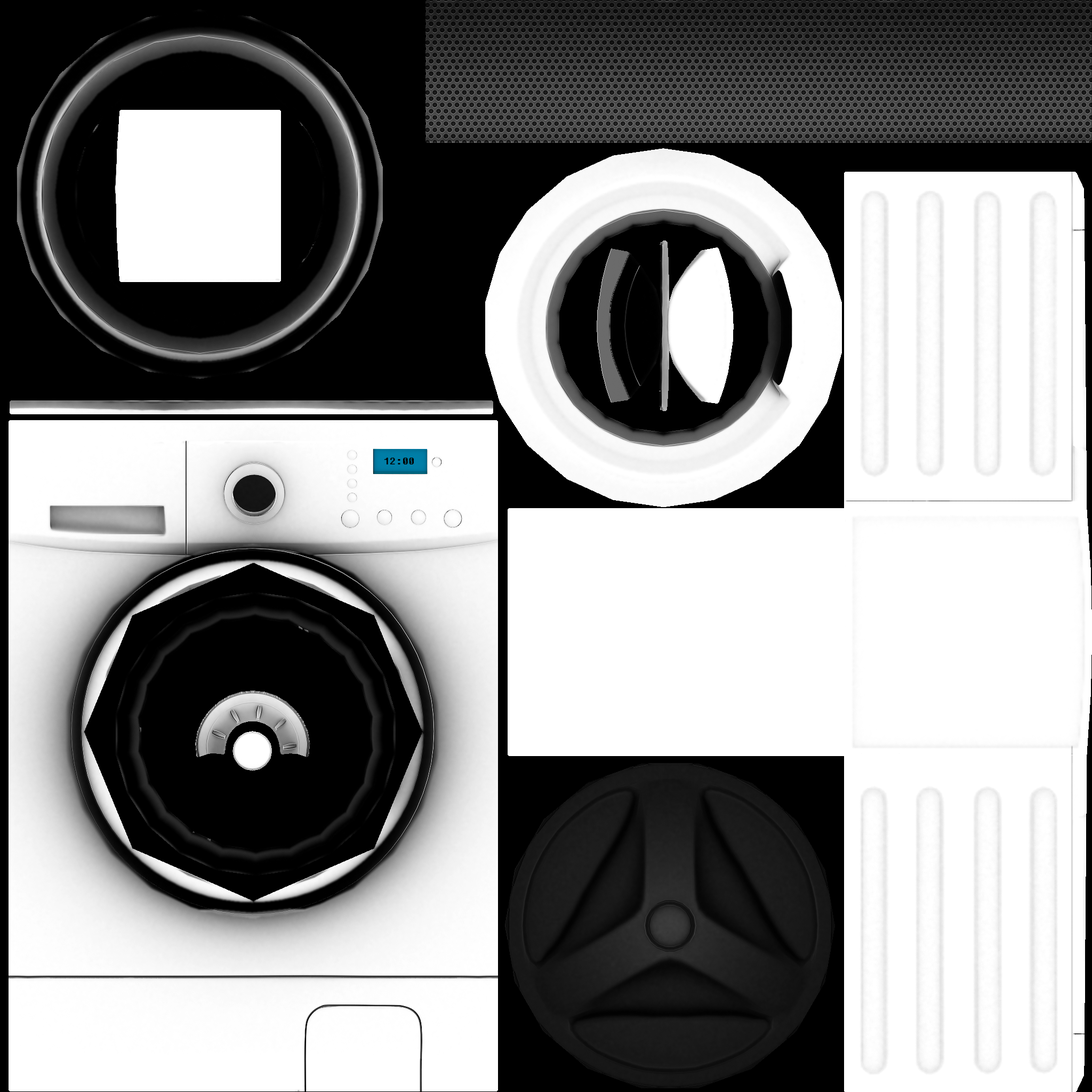
<style>
.page{position:relative;width:1092px;height:1092px;background:#ffffff}
.page>*{position:absolute;margin:0}
.t1{font:9.7px "Fixedsys";color:#000000}
</style>
<div class="page">
<p class="t1" style="left:384px;top:457px;width:30px;height:7px">12:00</p>
</div>
